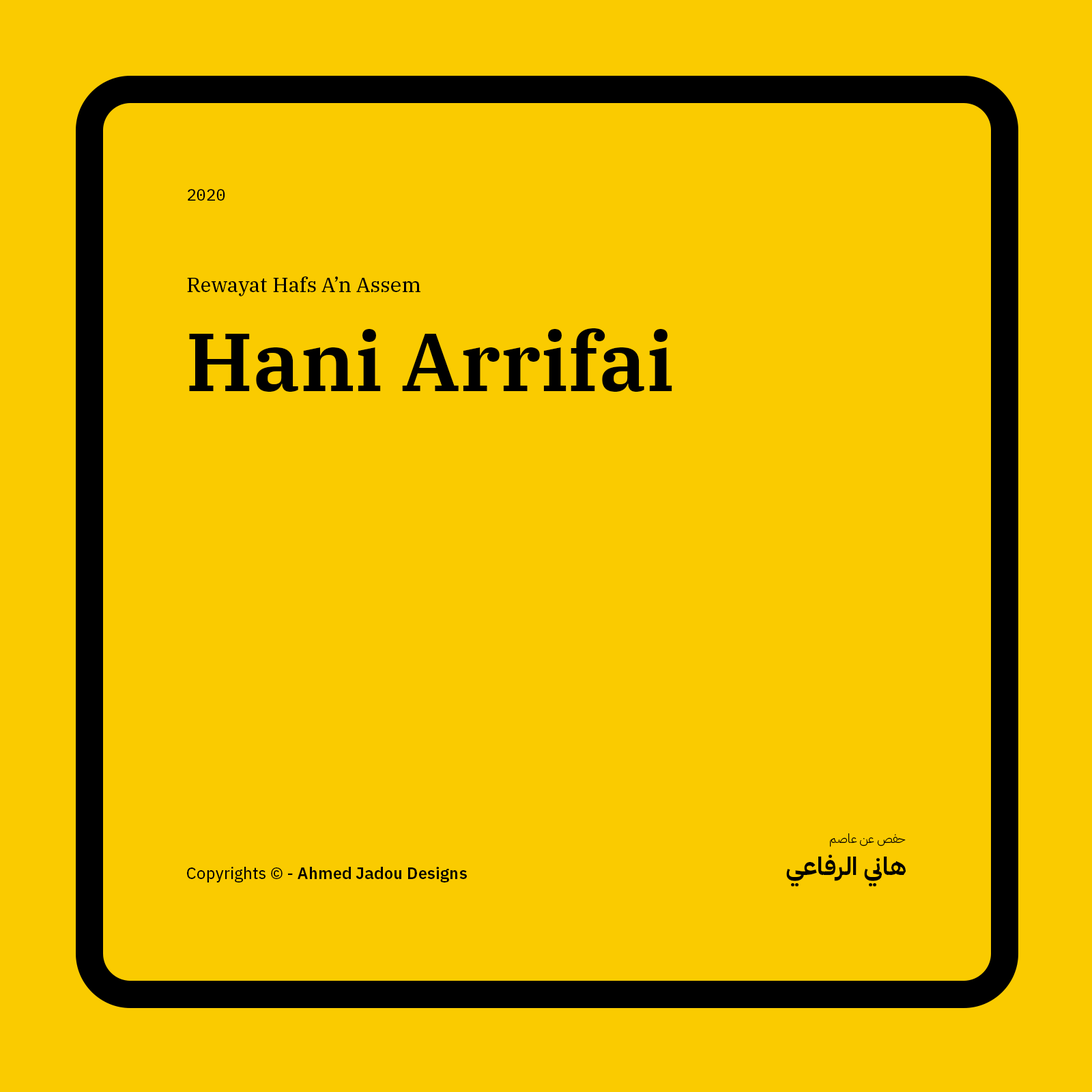
<style>
.page{position:relative;width:1092px;height:1092px;background:#facb00}
.page>*{position:absolute;margin:0}
.t1{font:16.4px "IBMPlexMono-Text";color:#000000}
.t2{font:20.5px "IBMPlexSerif-Text";color:#000000}
.t3{font:81.9px "IBMPlexSerif-SemiBold";color:#000000}
.t4{font:12.3px "IBMPlexArabic-Light";color:#000000}
.t5{font:24.6px "IBMPlexArabic-Bold";color:#000000}
.t6{font:16.4px "IBMPlexSans-SemiBold";color:#000000}
.t7{font:16.4px "IBMPlexSans-Text";color:#000000}
</style>
<div class="page">
<p class="t1" style="left:188px;top:189px;width:37px;height:12px">2020</p>
<p class="t2" style="left:187px;top:276px;width:233px;height:20px">Rewayat Hafs A’n Assem</p>
<p class="t3" style="left:189px;top:328px;width:483px;height:64px">Hani Arrifai</p>
<p class="t4" style="left:830px;top:833px;width:76px;height:14px">حفص عن عاصم</p>
<p class="t5" style="left:786px;top:854px;width:120px;height:33px">هاني الرفاعي</p>
<p class="t6" style="left:187px;top:867px;width:280px;height:15px"><span class="t7">Copyrights © - </span>Ahmed Jadou Designs</p>
</div>
